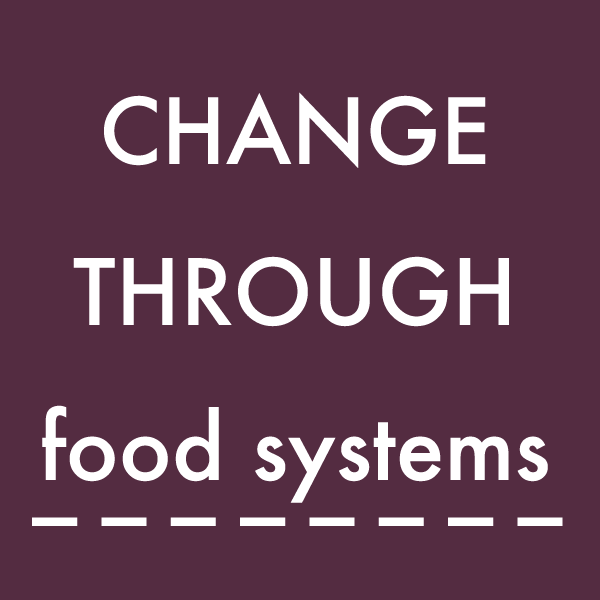
<style>
.page{position:relative;width:600px;height:600px;background:#542c41}
.page>*{position:absolute;margin:0}
.t1{font:88.3px "Futura-Medium";color:#ffffff}
.t2{font:79.3px "Futura-Medium";color:#ffffff}
</style>
<div class="page">
<p class="t1" style="left:73px;top:92px;width:440px;height:409px;text-align:center">CHANGE<br><br>THROUGH<br><br>_ _ _ _ _ _</p>
<p class="t1" style="left:73px;top:92px;width:436px;height:235px;text-align:center">CHANGE<br><br>THROUGH</p>
<p class="t1" style="left:73px;top:92px;width:436px;height:235px;text-align:center">CHANGE<br><br>THROUGH</p>
<p class="t1" style="left:42px;top:405px;width:506px;height:98px">food systems</p>
<p class="t2" style="left:32px;top:517px;width:531px;height:9px">_ _ _ _ _ _ _ _</p>
<p class="t2" style="left:32px;top:517px;width:531px;height:9px">_ _ _ _ _ _ _ _</p>
</div>
